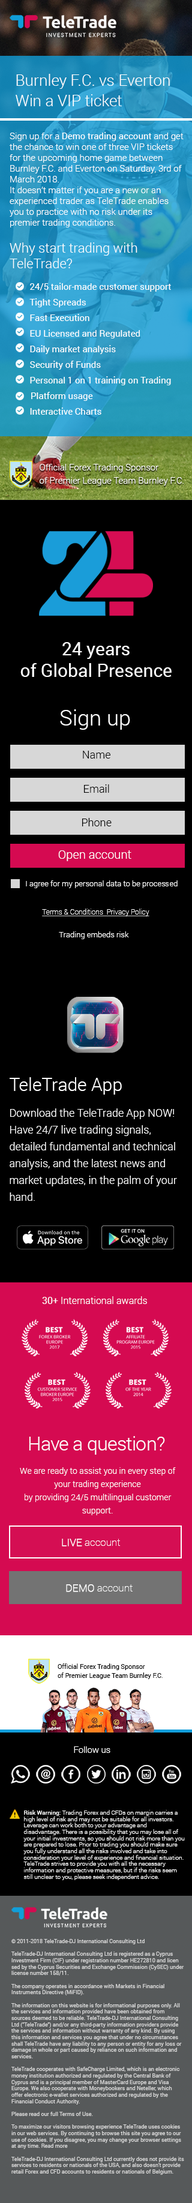
<style>
.page{position:relative;width:192px;height:2203px;background:#000000}
.page>*{position:absolute;margin:0}
.t1{font:15.6px/20.4px "Roboto-Light";color:#ffffff}
.t2{font:9px "Roboto-Light";color:#ffffff}
.t3{font:9px "Roboto-Regular";color:#ffffff}
.t4{font:9px/15.6px "Roboto-Regular";color:#ffffff}
.t5{font:13.2px "Roboto-Light";color:#ffffff}
.t6{font:9px/13.2px "Roboto-Light";color:#ffffff}
.t7{font:18px "Roboto-Regular";color:#fefefe}
.t8{font:21.6px "Roboto-Light";color:#ffffff}
.t9{font:12px "Roboto-Light";color:#ffffff}
.t10{font:7.8px "Roboto-Light";color:#ffffff}
.t11{font:7.2px "Roboto-Thin";color:#ffffff;text-decoration:underline}
.t12{font:10.8px/16.8px "Roboto-Light";color:#ffffff}
.t13{font:18px/9px "Roboto-Light";color:#ffffff}
.t14{font:9.6px "Roboto-Light";color:#ffffff}
.t15{font:9.6px "Roboto-Regular";color:#ffffff}
.t16{font:19.2px "Roboto-Light";letter-spacing:-0.025em;color:#ffffff}
.t17{font:8.4px/13.2px "Roboto-Light";color:#ffffff}
.t18{font:10.2px "Roboto-Thin";color:#ffffff}
.t19{font:10.2px "Roboto-Thin";color:#ffffff;font-weight:bold}
.t20{font:6.4px/8.8px "Roboto-Regular";color:#000000}
.t21{font:8.8px "Roboto-Light";color:#fefefe}
.t22{font:6px/6.4px "Roboto-Light";color:#fefefe}
.t23{font:6px/6.4px "Roboto-Regular";color:#fefefe}
.t24{font:5.4px/6.4px "Roboto-Regular";color:#d9d9d9}
</style>
<div class="page">
<p class="t1" style="left:16px;top:74px;width:154px;height:32px">Burnley F.C. vs Everton<br>Win a VIP ticket</p>
<p class="t2" style="left:10px;top:132px;width:174px;height:95px">Sign up for a <span class="t3">Demo trading account</span> and get the chance to win one of three VIP tickets for the upcoming home game between Burnley F.C. and Everton on Saturday, 3rd of March 2018.<br>It doesn’t matter if you are a new or an experienced trader as TeleTrade enables you to practice with no risk under its premier trading conditions.</p>
<p class="t4" style="left:10px;top:242px;width:161px;height:173px"><span class="t5">Why start trading with TeleTrade?<br><br>         </span>24/5 tailor-made customer support<br>         Tight Spreads<br>         Fast Execution<br>         EU Licensed and Regulated<br>         Daily market analysis<br>         Security of Funds<br>         Personal 1 on 1 training on Trading<br>Platform usage<br>         Interactive Charts<br>         Economic Calendar</p>
<p class="t6" style="left:40px;top:464px;width:144px;height:21px">Official Forex Trading Sponsor<br>of Premier League Team Burnley F.C.</p>
<p class="t7" style="left:20px;top:642px;width:152px;height:35px;text-align:center">24 years<br>of Global Presence</p>
<p class="t8" style="left:60px;top:709px;width:70px;height:21px">Sign up</p>
<p class="t9" style="left:58px;top:850px;width:73px;height:11px">Open account</p>
<p class="t10" style="left:26px;top:880px;width:152px;height:8px">I agree for my personal data to be processed</p>
<p class="t11" style="left:42px;top:908px;width:107px;height:8px">Terms &amp; Conditions  Privacy Policy</p>
<p class="t10" style="left:59px;top:931px;width:70px;height:8px">Trading embeds risk</p>
<p class="t12" style="left:10px;top:1077px;width:167px;height:124px"><span class="t13">TeleTrade App<br><br></span>Download the TeleTrade App NOW! <br>Have 24/7 live trading signals, detailed fundamental and technical analysis, and the latest news and market updates, in the palm of your hand.</p>
<p class="t14" style="left:42px;top:1296px;width:105px;height:8px"><span class="t15">30+</span> International awards</p>
<p class="t16" style="left:29px;top:1436px;width:136px;height:18px">Have a question?</p>
<p class="t17" style="left:20px;top:1467px;width:156px;height:48px;text-align:center">We are ready to assist you in every step of your trading experience <br>by providing 24/5 multilingual customer support.</p>
<p class="t18" style="left:62px;top:1538px;width:59px;height:8px"><span class="t19">LIVE</span> account</p>
<p class="t18" style="left:66px;top:1584px;width:67px;height:8px"><span class="t19">DEMO</span> account</p>
<p class="t20" style="left:58px;top:1663px;width:105px;height:16px">Official Forex Trading Sponsor<br>of Premier League Team Burnley F.C.</p>
<p class="t21" style="left:74px;top:1746px;width:36px;height:7px">Follow us</p>
<p class="t22" style="left:23px;top:1810px;width:162px;height:70px"><span class="t23">Risk Warning:</span> Trading Forex and CFDs on margin carries a high level of risk and may not be suitable for all investors. Leverage can work both to your advantage and disadvantage. There is a possibility that you may lose all of your initial investments, so you should not risk more than you are prepared to lose. Prior to trading you should make sure you fully understand all the risks involved and take into consideration your level of experience and financial situation. TeleTrade strives to provide you with all the necessary information and protective measures, but if the risks seem still unclear to you, please seek independent advice.</p>
<p class="t24" style="left:11px;top:1939px;width:173px;height:235px">© 2011-2018 TeleTrade-DJ International Consulting Ltd<br><br>TeleTrade-DJ International Consulting Ltd is registered as a Cyprus Investment Firm (CIF) under registration number HE272810 and licen<br>sed by the Cyprus Securities and Exchange Commission (CySEC) under license number 158/11.<br><br>The company operates in accordance with Markets in Financial Instruments Directive (MiFID).<br><br>The information on this website is for informational purposes only. All the services and information provided have been obtained from sources deemed to be reliable. TeleTrade-DJ International Consulting Ltd ("TeleTrade") and/or any third-party information providers provide the services and information without warranty of any kind. By using this information and services you agree that under no circumstances shall TeleTrade have any liability to any person or entity for any loss or damage in whole or part caused by reliance on such information and services.<br><br>TeleTrade cooperates with SafeCharge Limited, which is an electronic money institution authorized and regulated by the Central Bank of Cyprus and is a principal member of MasterCard Europe and Visa Europe. We also cooperate with Moneybookers and Neteller, which offer electronic e-wallet services authorized and regulated by the Financial Conduct Authority.<br><br>Please read our full Terms of Use.<br><br>To maximize our visitors browsing experience TeleTrade uses cookies in our web services. By continuing to browse this site you agree to our use of cookies. If you disagree, you may change your browser settings at any time. Read more<br><br>TeleTrade-DJ International Consulting Ltd currently does not provide its services to residents or nationals of the USA, and also doesn't provide retail Forex and CFD accounts to residents or nationals of Belgium.</p>
</div>
